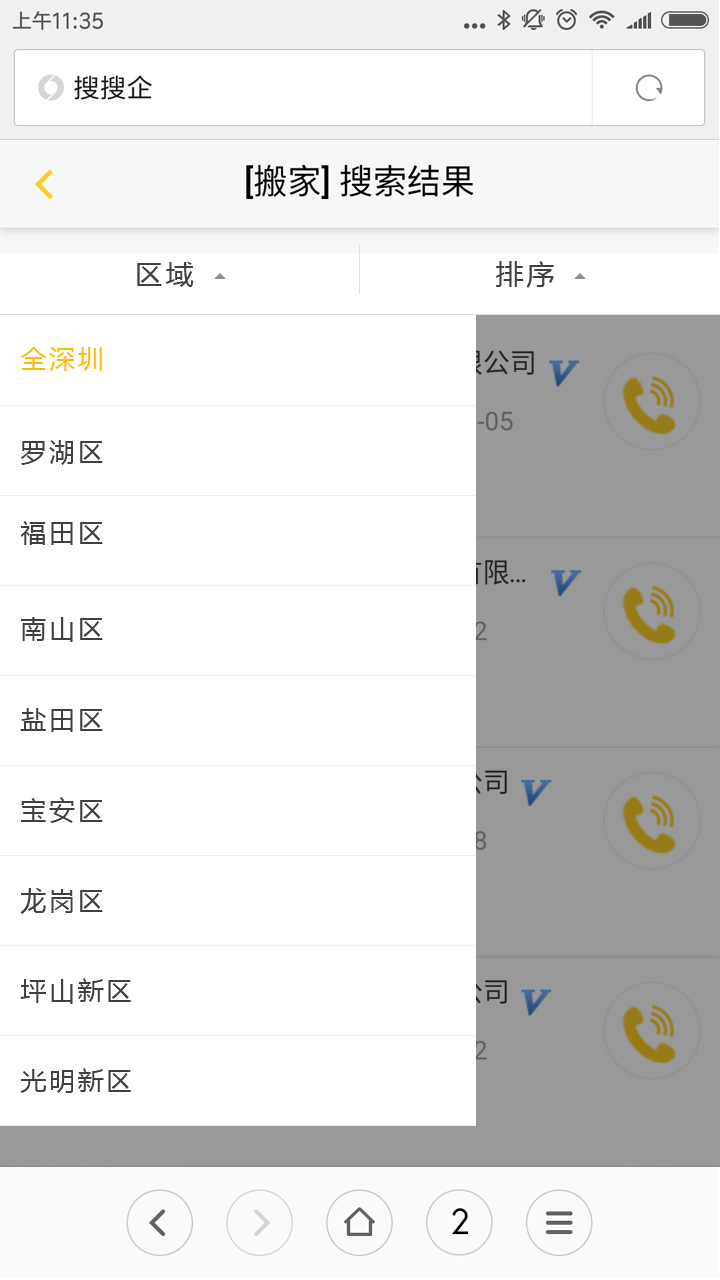
<style>
.page{position:relative;width:720px;height:1280px;background:#ffffff}
.page>*{position:absolute;margin:0}
.t1{font:28px "MicrosoftYaHei";letter-spacing:0.1em;color:#404040}
.t2{font:26px "MicrosoftYaHei";letter-spacing:0.1em;color:#fabe00}
.t3{font:26px "MicrosoftYaHei";letter-spacing:0.1em;color:#404040}
</style>
<div class="page">
<p class="t1" style="left:137px;top:261px;width:417px;height:27px">区域                          排序</p>
<p class="t2" style="left:20px;top:347px;width:82px;height:24px">全深圳</p>
<p class="t3" style="left:21px;top:440px;width:82px;height:25px">罗湖区</p>
<p class="t3" style="left:21px;top:521px;width:82px;height:24px">福田区</p>
<p class="t3" style="left:21px;top:617px;width:82px;height:25px">南山区</p>
<p class="t3" style="left:20px;top:708px;width:83px;height:24px">盐田区</p>
<p class="t3" style="left:21px;top:797px;width:82px;height:26px">宝安区</p>
<p class="t3" style="left:20px;top:888px;width:83px;height:26px">龙岗区</p>
<p class="t3" style="left:20px;top:978px;width:111px;height:26px">坪山新区</p>
<p class="t3" style="left:20px;top:1068px;width:111px;height:25px">光明新区</p>
</div>
